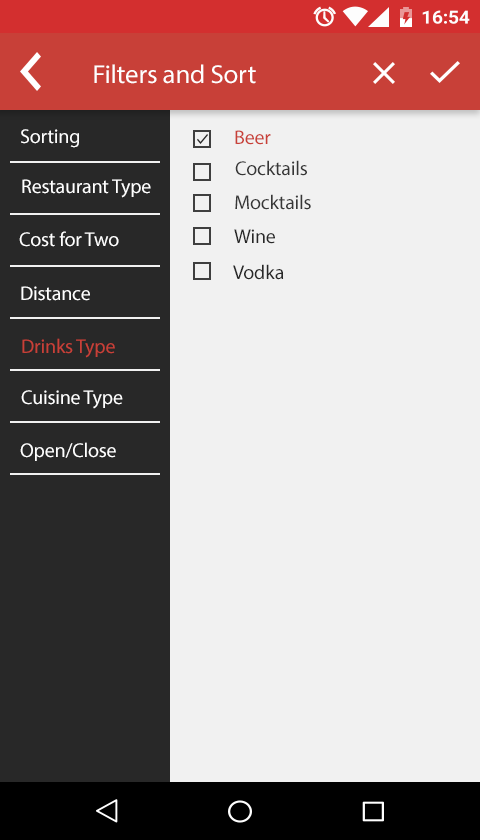
<style>
.page{position:relative;width:480px;height:840px;background:#f1f1f1}
.page>*{position:absolute;margin:0}
.t1{font:26.1px "MyriadPro-Regular";letter-spacing:-0.01em;color:#ffffff;scale:1.03 1}
.t2{font:20px "MyriadPro-Regular";letter-spacing:-0.01em;color:#fefefe}
.t3{font:20px "MyriadPro-Regular";letter-spacing:-0.01em;color:#c94038}
.t4{font:20px "MyriadPro-Regular";letter-spacing:-0.01em;color:#373737}
.t5{font:20px "MyriadPro-Regular";letter-spacing:-0.01em;color:#ffffff}
.t6{font:20px "MyriadPro-Regular";letter-spacing:-0.01em;color:#282828}
</style>
<div class="page">
<p class="t1" style="left:94px;top:64px;width:162px;height:20px">Filters and Sort</p>
<p class="t2" style="left:21px;top:129px;width:58px;height:19px">Sorting</p>
<p class="t3" style="left:235px;top:130px;width:36px;height:15px">Beer</p>
<p class="t4" style="left:235px;top:160px;width:72px;height:16px">Cocktails</p>
<p class="t5" style="left:22px;top:179px;width:129px;height:19px">Restaurant Type</p>
<p class="t4" style="left:235px;top:194px;width:76px;height:16px">Mocktails</p>
<p class="t5" style="left:19px;top:231px;width:100px;height:16px">Cost for Two</p>
<p class="t6" style="left:234px;top:229px;width:41px;height:15px">Wine</p>
<p class="t6" style="left:233px;top:264px;width:51px;height:16px">Vodka</p>
<p class="t5" style="left:21px;top:286px;width:69px;height:15px">Distance</p>
<p class="t3" style="left:22px;top:338px;width:93px;height:20px">Drinks Type</p>
<p class="t5" style="left:21px;top:390px;width:102px;height:19px">Cuisine Type</p>
<p class="t5" style="left:20px;top:442px;width:96px;height:19px">Open/Close</p>
</div>
